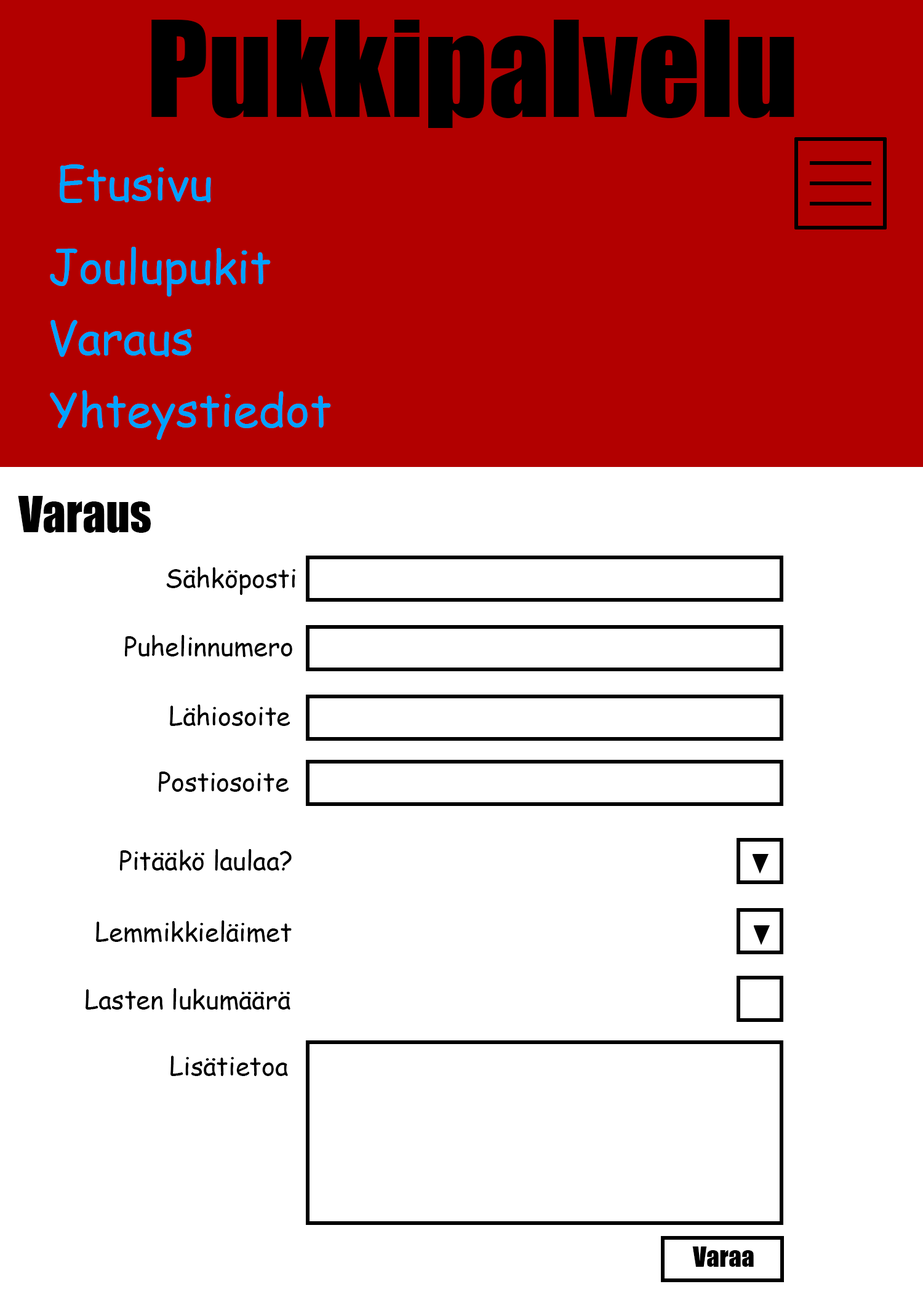
<style>
.page{position:relative;width:923px;height:1292px;background:#ffffff}
.page>*{position:absolute;margin:0}
.t1{font:123.1px "Impact";color:#000000}
.t2{font:46.1px "ComicSansMS";color:#00a2ff}
.t3{font:46.1px "Impact";color:#000000}
.t4{font:25.6px "ComicSansMS";color:#000000}
.t5{font:25.6px "Impact";color:#000000}
</style>
<div class="page">
<p class="t1" style="left:151px;top:20px;width:643px;height:108px">Pukkipalvelu</p>
<p class="t2" style="left:60px;top:164px;width:151px;height:39px">Etusivu</p>
<p class="t2" style="left:50px;top:247px;width:221px;height:50px">Joulupukit</p>
<p class="t2" style="left:50px;top:320px;width:142px;height:37px">Varaus</p>
<p class="t2" style="left:50px;top:390px;width:281px;height:50px">Yhteystiedot</p>
<p class="t3" style="left:18px;top:496px;width:133px;height:37px">Varaus</p>
<p class="t4" style="left:166px;top:567px;width:129px;height:28px">Sähköposti</p>
<p class="t4" style="left:125px;top:635px;width:167px;height:22px">Puhelinnumero</p>
<p class="t4" style="left:170px;top:704px;width:120px;height:22px">Lähiosoite</p>
<p class="t4" style="left:159px;top:772px;width:130px;height:20px">Postiosoite</p>
<p class="t4" style="left:120px;top:849px;width:172px;height:22px">Pitääkö laulaa?</p>
<p class="t4" style="left:96px;top:920px;width:196px;height:23px">Lemmikkieläimet</p>
<p class="t4" style="left:86px;top:988px;width:204px;height:22px">Lasten lukumäärä</p>
<p class="t4" style="left:170px;top:1056px;width:118px;height:20px">Lisätietoa</p>
<p class="t5" style="left:692px;top:1247px;width:62px;height:20px">Varaa</p>
</div>
